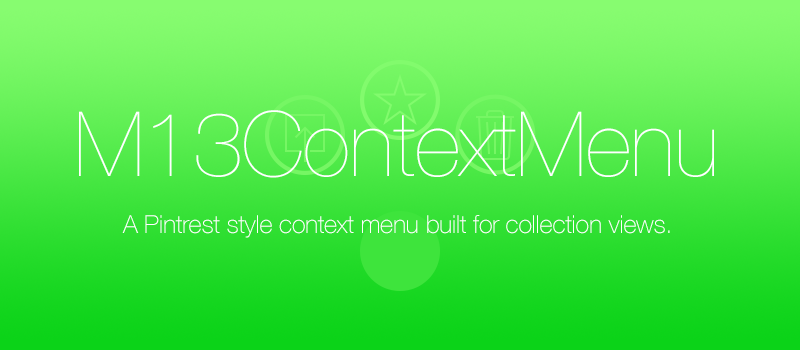
<style>
.page{position:relative;width:800px;height:350px}
.page>*{position:absolute;margin:0}
.t1{font:90px "HelveticaNeue-UltraLight";letter-spacing:-0.007em;color:#ffffff}
.t2{font:25px "HelveticaNeue-Thin";letter-spacing:-0.007em;color:#ffffff}
</style>
<div class="page">
<p class="t1" style="left:79px;top:110px;width:635px;height:68px">M13ContextMenu</p>
<p class="t2" style="left:122px;top:215px;width:548px;height:23px">A Pintrest style context menu built for collection views.</p>
</div>
